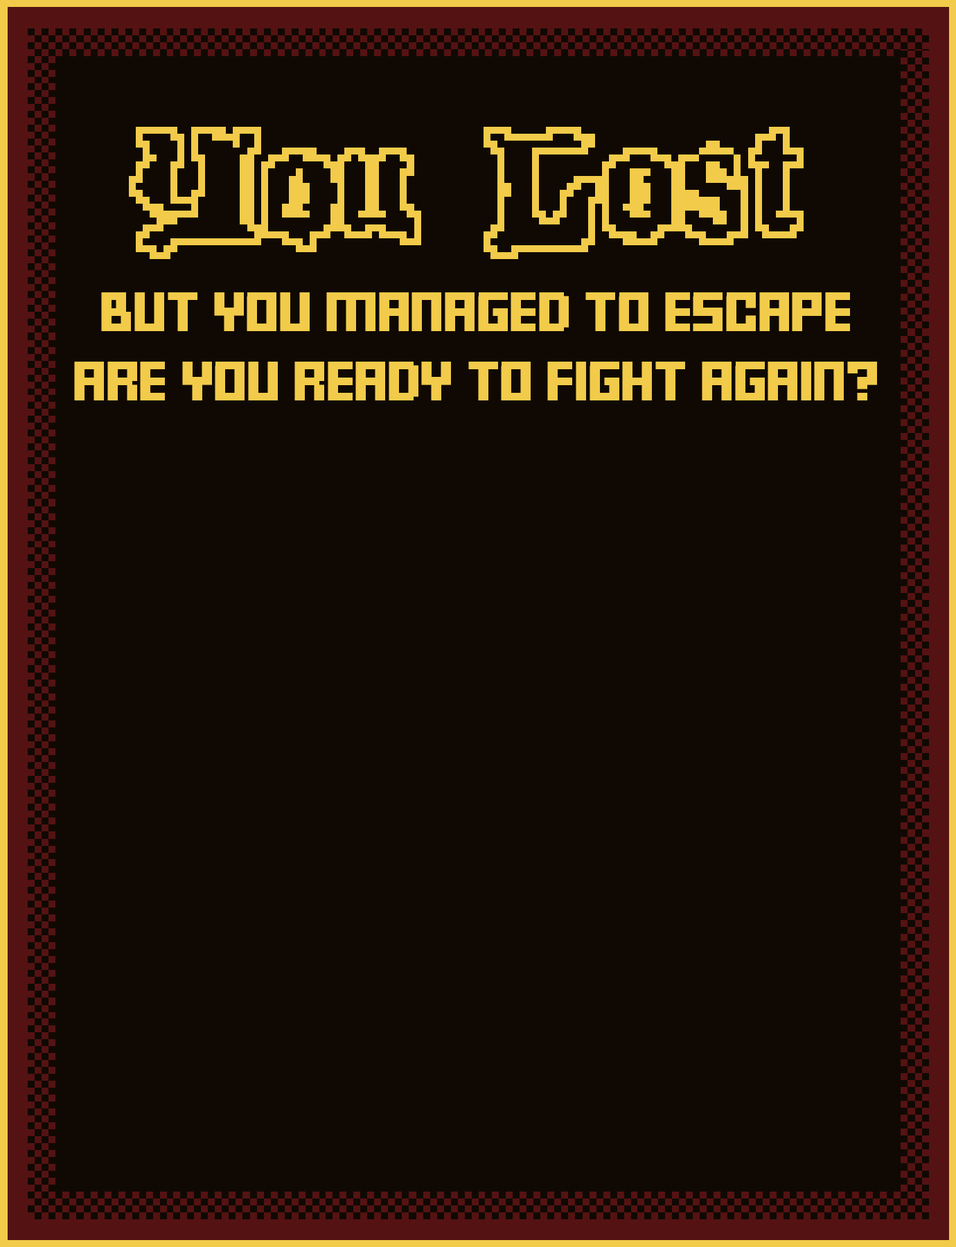
<style>
.page{position:relative;width:956px;height:1247px;background:#100903}
.page>*{position:absolute;margin:0}
.t1{font:31px/69.6px "FFFForward";letter-spacing:-0.025em;color:#f2cb4a;scale:1.25 1}
</style>
<div class="page">
<p class="t1" style="left:74px;top:292px;width:803px;height:108px;text-align:center">BUT YOU MANAGED TO ESCAPE<br>ARE YOU READY TO FIGHT AGAIN?</p>
</div>
